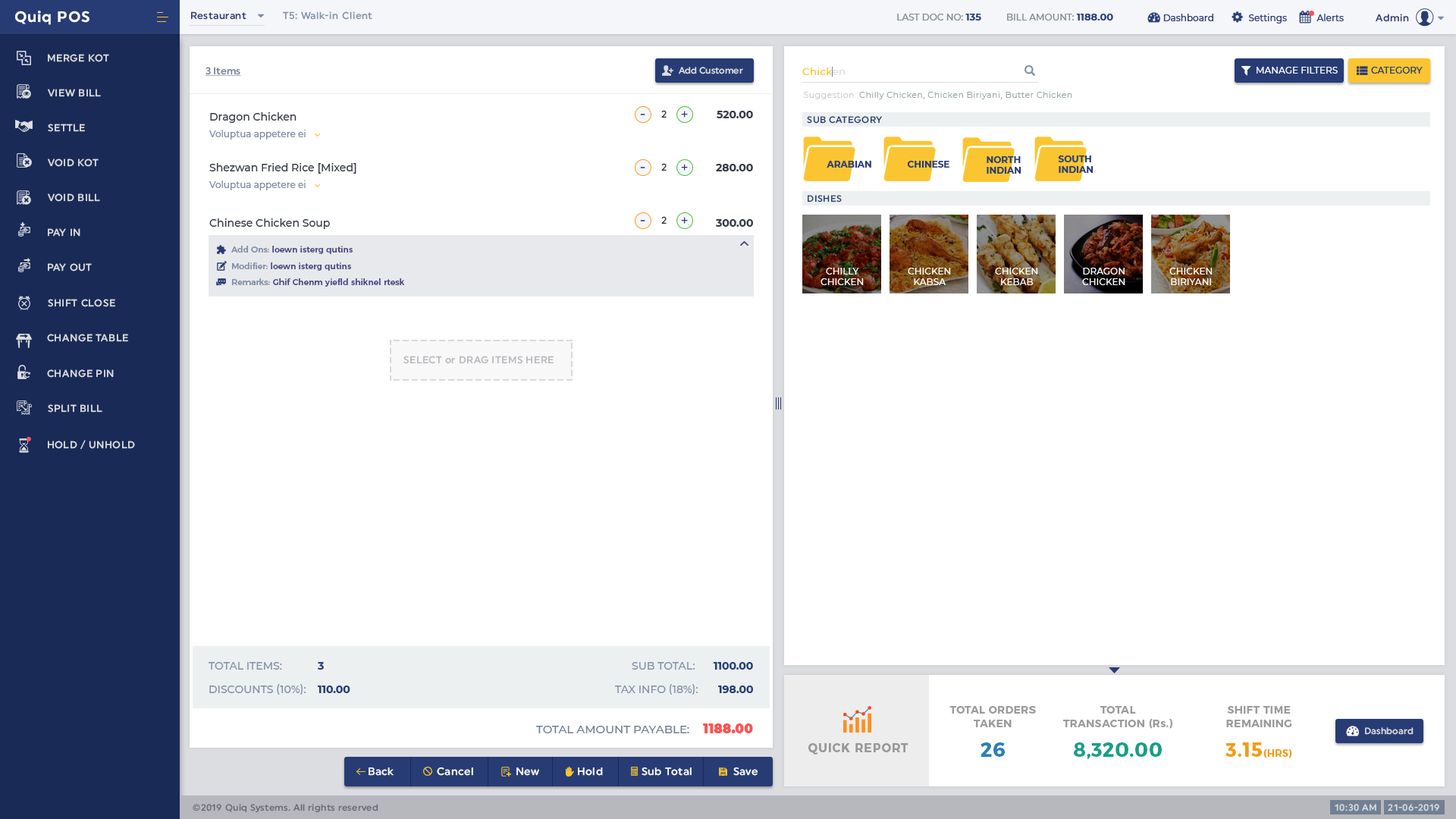
<style>
.page{position:relative;width:1456px;height:819px;background:#ffffff}
.page>*{position:absolute;margin:0}
.t1{font:15.2px "Uniform-Bold";letter-spacing:0.04em;color:#ffffff}
.t2{font:9.9px "Uniform-Medium";letter-spacing:0.04em;color:#273c75}
.t3{font:9.9px "Uniform-Medium";letter-spacing:0.04em;color:#8393a9}
.t4{font:9.1px "Montserrat-Medium";color:#7f8c8d;text-transform:uppercase}
.t5{font:9.9px "Montserrat-Bold";color:#273c75;text-transform:uppercase}
.t6{font:9.9px "Uniform-Medium";letter-spacing:0.04em;color:#dcdde1;text-transform:uppercase}
.t7{font:9.9px "Uniform-Medium";color:#718093;text-decoration:underline}
.t8{font:9.1px "Uniform-Medium";color:#dcdde1}
.t9{font:9.9px "Montserrat-Medium";letter-spacing:0.04em;color:#fbc531}
.t10{font:9.9px "Montserrat-Medium";letter-spacing:0.04em;color:#dcdde1}
.t11{font:9.1px "Montserrat-Medium";color:#ffffff;text-transform:uppercase}
.t12{font:9.1px "Montserrat-Medium";color:#273c75;text-transform:uppercase}
.t13{font:8.3px "Montserrat-Regular";letter-spacing:0.04em;color:#95a5a6}
.t14{font:8.3px "Montserrat-Regular";letter-spacing:0.04em;color:#cacbcf}
.t15{font:10.6px "Montserrat-Medium";color:#353b48}
.t16{font:12.9px "Uniform-Medium"}
.t17{font:9.9px "Uniform-Medium";color:#353b48}
.t18{font:11.4px "Uniform-Medium";color:#273c75}
.t19{font:10.6px "Montserrat-Bold";color:#353b48}
.t20{font:9.1px "Uniform-Medium";letter-spacing:0.04em;color:#273c75;text-transform:uppercase}
.t21{font:9.1px "Montserrat-Medium";color:#7f8fa6}
.t22{font:9.1px "Montserrat-Bold";color:#273c75;text-transform:uppercase}
.t23{font:8.3px "Montserrat-Medium";color:#474787}
.t24{font:8.3px "Montserrat-Medium";color:#7f8fa6}
.t25{font:9.9px "Uniform-Medium";letter-spacing:0.03em;color:#b7b9bd;text-transform:uppercase}
.t26{font:9.9px "Uniform-Medium";letter-spacing:0.03em;color:#b7b9bd}
.t27{font:10.6px "Montserrat-Medium";color:#7f8fa6;text-transform:uppercase}
.t28{font:10.6px "Montserrat-Bold";color:#273c75;text-transform:uppercase}
.t29{font:10.6px/13.6px "Montserrat-Bold";letter-spacing:0.02em;color:#9c9c9c;text-transform:uppercase}
.t30{font:10.6px/13.6px "Montserrat-Bold";letter-spacing:0.02em;color:#9c9c9c}
.t31{font:11.4px "Montserrat-Medium";color:#718093;text-transform:uppercase}
.t32{font:12.9px "Montserrat-Black";color:#ff5252}
.t33{font:9.1px "Uniform-Medium";letter-spacing:0.02em;color:#dcdde1}
.t34{font:12.1px "Montserrat-Bold";letter-spacing:0.04em;color:#989898;text-transform:uppercase}
.t35{font:19.7px "Montserrat-Bold";letter-spacing:0.02em;color:#2980b9;text-transform:uppercase}
.t36{font:19.7px "Montserrat-Bold";letter-spacing:0.02em;color:#16a085;text-transform:uppercase}
.t37{font:9.9px "Montserrat-Bold";letter-spacing:0.02em;color:#f39c12;text-transform:uppercase}
.t38{font:19.7px "Montserrat-Bold";letter-spacing:0.02em;color:#f39c12;text-transform:uppercase}
.t39{font:10.6px "Uniform-Medium";letter-spacing:0.04em;color:#ffffff}
.t40{font:9.1px "Uniform-Medium";letter-spacing:0.03em;color:#676b75}
.t41{font:9.1px "Uniform-Medium";letter-spacing:0.04em;color:#dcdde1;text-transform:uppercase}
</style>
<div class="page">
<p class="t1" style="left:15px;top:11px;width:74px;height:14px">Quiq POS</p>
<p class="t2" style="left:191px;top:11px;width:55px;height:9px">Restaurant</p>
<p class="t3" style="left:283px;top:11px;width:89px;height:9px">T5: Walk-in Client</p>
<p class="t4" style="left:897px;top:14px;width:216px;height:6px">Last Doc No: <span class="t5">135         </span>Bill Amount: <span class="t5">1188.00</span></p>
<p class="t2" style="left:1376px;top:14px;width:33px;height:8px">Admin</p>
<p class="t6" style="left:48px;top:54px;width:61px;height:8px">Merge Kot</p>
<p class="t7" style="left:206px;top:67px;width:35px;height:10px">3 Items</p>
<p class="t8" style="left:679px;top:67px;width:64px;height:7px">Add Customer</p>
<p class="t9" style="left:802px;top:67px;width:43px;height:8px">Chick<span class="t10">en</span></p>
<p class="t11" style="left:1257px;top:67px;width:81px;height:7px">Manage Filters</p>
<p class="t12" style="left:1371px;top:67px;width:52px;height:7px">Category</p>
<p class="t6" style="left:48px;top:89px;width:53px;height:8px">View Bill</p>
<p class="t13" style="left:803px;top:92px;width:269px;height:7px"><span class="t14">Suggestion: </span>Chilly Chicken, Chicken Biriyani, Butter Chicken</p>
<p class="t15" style="left:210px;top:112px;width:87px;height:11px">Dragon Chicken</p>
<p class="t16" style="left:640px;top:114px;width:5px;height:1px">-</p>
<p class="t17" style="left:661px;top:110px;width:6px;height:8px">2</p>
<p class="t18" style="left:681px;top:111px;width:7px;height:7px">+</p>
<p class="t19" style="left:717px;top:111px;width:36px;height:7px">520.00</p>
<p class="t6" style="left:48px;top:124px;width:37px;height:8px">Settle</p>
<p class="t20" style="left:807px;top:116px;width:76px;height:8px">Sub Category</p>
<p class="t21" style="left:209px;top:130px;width:97px;height:10px">Voluptua appetere ei</p>
<p class="t6" style="left:48px;top:158px;width:51px;height:9px">Void Kot</p>
<p class="t22" style="left:827px;top:161px;width:44px;height:7px">Arabian</p>
<p class="t22" style="left:907px;top:161px;width:42px;height:7px">Chinese</p>
<p class="t22" style="left:987px;top:156px;width:34px;height:18px">North<br>Indian</p>
<p class="t22" style="left:1058px;top:155px;width:36px;height:18px">South<br>Indian</p>
<p class="t15" style="left:209px;top:163px;width:147px;height:11px">Shezwan Fried Rice [Mixed]</p>
<p class="t16" style="left:640px;top:167px;width:5px;height:1px">-</p>
<p class="t17" style="left:661px;top:163px;width:6px;height:8px">2</p>
<p class="t18" style="left:681px;top:164px;width:7px;height:7px">+</p>
<p class="t19" style="left:716px;top:164px;width:37px;height:7px">280.00</p>
<p class="t21" style="left:209px;top:180px;width:97px;height:10px">Voluptua appetere ei</p>
<p class="t6" style="left:48px;top:193px;width:52px;height:9px">Void Bill</p>
<p class="t20" style="left:808px;top:195px;width:34px;height:7px">Dishes</p>
<p class="t15" style="left:209px;top:218px;width:121px;height:11px">Chinese Chicken Soup</p>
<p class="t16" style="left:640px;top:220px;width:5px;height:1px">-</p>
<p class="t17" style="left:661px;top:216px;width:6px;height:8px">2</p>
<p class="t18" style="left:681px;top:217px;width:7px;height:7px">+</p>
<p class="t19" style="left:716px;top:219px;width:37px;height:8px">300.00</p>
<p class="t6" style="left:48px;top:228px;width:32px;height:9px">Pay In</p>
<p class="t23" style="left:231px;top:246px;width:122px;height:8px"><span class="t24">Add Ons: </span>loewn isterg qutins</p>
<p class="t6" style="left:48px;top:263px;width:44px;height:8px">Pay out</p>
<p class="t23" style="left:232px;top:262px;width:119px;height:9px"><span class="t24">Modifier: </span>loewn isterg qutins</p>
<p class="t11" style="left:821px;top:268px;width:43px;height:17px;text-align:center">Chilly<br>Chicken</p>
<p class="t11" style="left:908px;top:268px;width:43px;height:17px;text-align:center">Chicken<br>Kabsa</p>
<p class="t11" style="left:995px;top:268px;width:43px;height:17px;text-align:center">Chicken<br>Kebab</p>
<p class="t11" style="left:1082px;top:268px;width:43px;height:17px;text-align:center">Dragon<br>Chicken</p>
<p class="t11" style="left:1169px;top:268px;width:44px;height:17px;text-align:center">Chicken<br>Biriyani</p>
<p class="t23" style="left:232px;top:278px;width:172px;height:9px"><span class="t24">Remarks: </span>Ghif Chenm yiefld shiknel rtesk</p>
<p class="t6" style="left:48px;top:299px;width:67px;height:8px">Shift Close</p>
<p class="t6" style="left:47px;top:334px;width:81px;height:8px">Change Table</p>
<p class="t25" style="left:403px;top:356px;width:151px;height:8px">Select <span class="t26">or</span> Drag Items Here</p>
<p class="t6" style="left:47px;top:369px;width:67px;height:9px">Change Pin</p>
<p class="t6" style="left:48px;top:404px;width:54px;height:9px">Split Bill</p>
<p class="t6" style="left:48px;top:440px;width:87px;height:10px">Hold / Unhold</p>
<p class="t27" style="left:209px;top:662px;width:115px;height:8px">Total Items:  <span class="t28">3</span></p>
<p class="t27" style="left:632px;top:662px;width:121px;height:8px">Sub Total: <span class="t28">1100.00</span></p>
<p class="t27" style="left:209px;top:684px;width:141px;height:11px">Discounts (10%): <span class="t28">110.00</span></p>
<p class="t27" style="left:615px;top:684px;width:138px;height:11px">Tax Info (18%):       <span class="t28">198.00</span></p>
<p class="t29" style="left:949px;top:706px;width:87px;height:21px;text-align:center">Total Orders<br>Taken</p>
<p class="t29" style="left:1063px;top:706px;width:109px;height:23px;text-align:center">Total<br>Transaction (R<span class="t30">s.</span>)</p>
<p class="t29" style="left:1226px;top:706px;width:65px;height:21px;text-align:center">Shift Time<br>Remaining</p>
<p class="t31" style="left:536px;top:723px;width:217px;height:10px">Total Amount Payable:    <span class="t32">1188.00</span></p>
<p class="t33" style="left:1365px;top:727px;width:49px;height:8px">Dashboard</p>
<p class="t34" style="left:808px;top:743px;width:100px;height:12px">Quick Report</p>
<p class="t35" style="left:981px;top:742px;width:24px;height:15px">26</p>
<p class="t36" style="left:1074px;top:742px;width:88px;height:17px">8,320.00</p>
<p class="t37" style="left:1225px;top:742px;width:67px;height:16px"><span class="t38">3.15</span>(Hrs)</p>
<p class="t39" style="left:369px;top:767px;width:25px;height:9px">Back</p>
<p class="t39" style="left:437px;top:767px;width:36px;height:9px">Cancel</p>
<p class="t39" style="left:516px;top:767px;width:23px;height:9px">New</p>
<p class="t39" style="left:578px;top:767px;width:25px;height:9px">Hold</p>
<p class="t39" style="left:642px;top:767px;width:50px;height:9px">Sub Total</p>
<p class="t39" style="left:733px;top:767px;width:25px;height:9px">Save</p>
<p class="t40" style="left:193px;top:804px;width:185px;height:9px">©2019 Quiq Systems. All rights reserved</p>
<p class="t41" style="left:1335px;top:804px;width:41px;height:7px">10:30 am</p>
<p class="t41" style="left:1388px;top:804px;width:51px;height:7px">21-06-2019</p>
</div>
